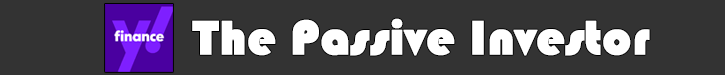
<style>
.page{position:relative;width:725px;height:75px;background:#333333}
.page>*{position:absolute;margin:0}
.t1{font:50px "Bauhaus93";color:#ffffff;font-weight:bold}
</style>
<div class="page">
<p class="t1" style="left:192px;top:18px;width:458px;height:38px">The Passive Investor</p>
</div>
